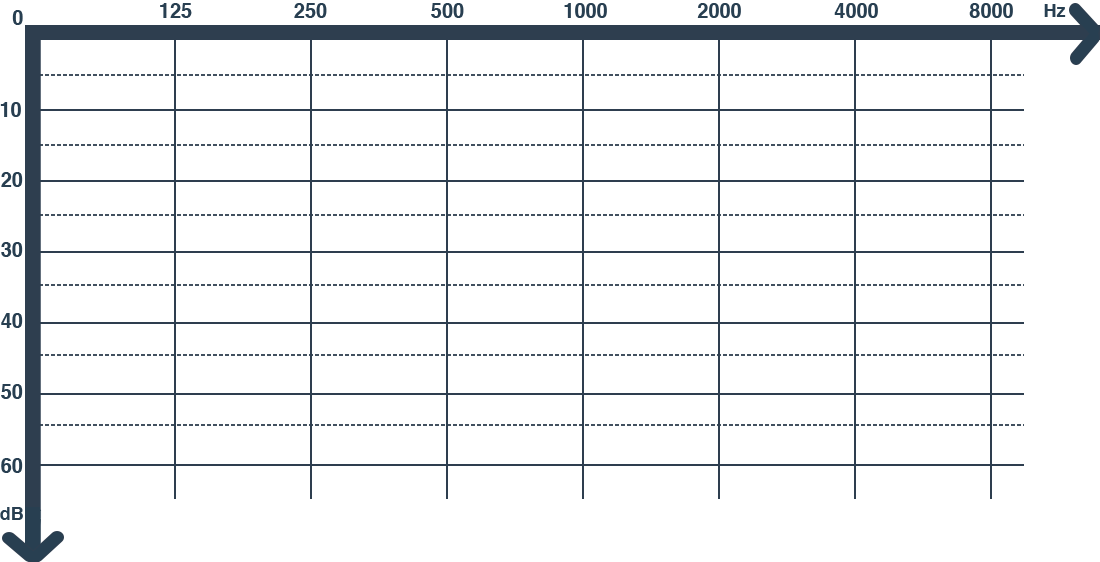
<style>
.page{position:relative;width:1100px;height:562px;background:#ffffff}
.page>*{position:absolute;margin:0}
.t1{font:20px "Helvetica-Bold";color:#283f51}
.t2{font:18px "Helvetica-Bold";color:#283f51}
</style>
<div class="page">
<p class="t1" style="left:160px;top:3px;width:32px;height:15px">125</p>
<p class="t1" style="left:294px;top:3px;width:33px;height:15px">250</p>
<p class="t1" style="left:431px;top:3px;width:33px;height:15px">500</p>
<p class="t1" style="left:564px;top:3px;width:43px;height:15px">1000</p>
<p class="t1" style="left:697px;top:3px;width:44px;height:15px">2000</p>
<p class="t1" style="left:834px;top:3px;width:44px;height:15px">4000</p>
<p class="t1" style="left:969px;top:3px;width:44px;height:15px">8000</p>
<p class="t2" style="left:1044px;top:4px;width:22px;height:13px">Hz</p>
<p class="t1" style="left:12px;top:10px;width:11px;height:15px">0</p>
<p class="t1" style="left:0px;top:102px;width:21px;height:15px">10</p>
<p class="t1" style="left:1px;top:172px;width:22px;height:15px">20</p>
<p class="t1" style="left:1px;top:242px;width:22px;height:15px">30</p>
<p class="t1" style="left:1px;top:313px;width:22px;height:15px">40</p>
<p class="t1" style="left:1px;top:384px;width:22px;height:15px">50</p>
<p class="t1" style="left:1px;top:458px;width:22px;height:15px">60</p>
<p class="t2" style="left:0px;top:507px;width:23px;height:13px">dB</p>
</div>
